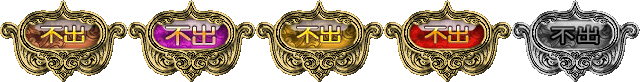
<style>
.page{position:relative;width:640px;height:82px;background:#ffffff}
.page>*{position:absolute;margin:0}
.t1{font:18.4px "STXihei";color:#868585;font-weight:bold;scale:1.34 1}
</style>
<div class="page">
<p class="t1" style="left:551px;top:26px;width:48px;height:18px">不出</p>
</div>
